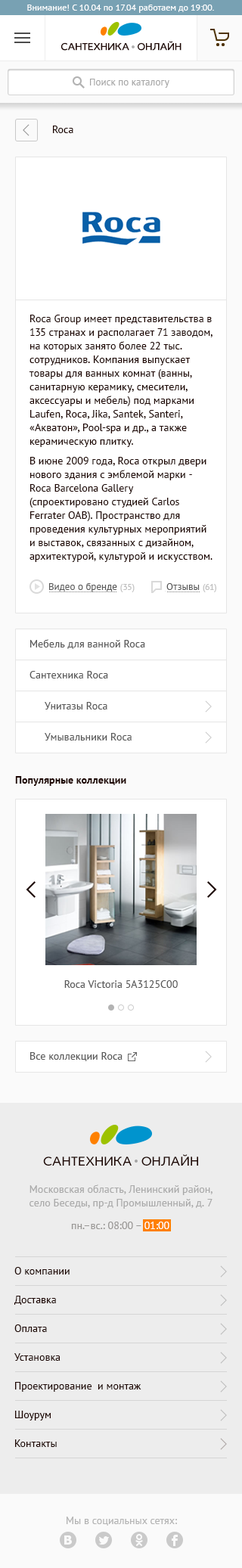
<style>
.page{position:relative;width:242px;height:1568px;background:#ffffff}
.page>*{position:absolute;margin:0}
.t1{font:9.1px "PTSans-Regular";color:#ffffff}
.t2{font:10.6px "IdealistSans";color:#1e0602;text-transform:uppercase}
.t3{font:9.8px "PTSans-Regular";color:#a6a6a6}
.t4{font:10.6px "PTSans-Regular";color:#1e0602}
.t5{font:10.6px/13.6px "PTSans-Regular";color:#1e0602}
.t6{font:9.8px "PTSans-Regular";color:#585858}
.t7{font:9.1px "PTSans-Regular";color:#bfbfbf}
.t8{font:10.6px/13.6px "PTSans-Regular";color:#585858}
.t9{font:10.6px "PTSans-Bold";color:#1e0602}
.t10{font:10.6px "PTSans-Regular";color:#585858}
.t11{font:13.6px "IdealistSans";color:#1e0602;text-transform:uppercase}
.t12{font:10.6px/13.6px "PTSans-Regular";color:#aaaaaa}
.t13{font:10.6px "PTSans-Regular";color:#999795}
.t14{font:10.6px "PTSans-Regular";color:#ffffff}
.t15{font:10.6px "PTSans-Regular";color:#b4b4b4}
</style>
<div class="page">
<p class="t1" style="left:27px;top:5px;width:187px;height:8px">Внимание! С 10.04 по 17.04 работаем до 19:00.</p>
<p class="t2" style="left:61px;top:41px;width:121px;height:10px">сантехника  онлайн</p>
<p class="t3" style="left:90px;top:79px;width:79px;height:9px">Поиск по каталогу</p>
<p class="t4" style="left:53px;top:126px;width:20px;height:7px">Roca</p>
<p class="t5" style="left:29px;top:315px;width:184px;height:247px">Roca Group имеет представительства в 135 странах и располагает 71 заводом, на которых занято более 22 тыс. сотрудников. Компания выпускает товары для ванных комнат (ванны, санитарную керамику, смесители, аксессуары и мебель) под марками Laufen, Roca, Jika, Santek, Santeri, «Акватон», Pool-spa и др., а также керамическую плитку.<br>В июне 2009 года, Roca открыл двери нового здания c эмблемой марки - Roca Barcelona Gallery (спроектировано студией Carlos Ferrater OAB). Пространство для проведения культурных мероприятий и выставок, связанных с дизайном, архитектурой, культурой и искусством.</p>
<p class="t6" style="left:49px;top:583px;width:86px;height:9px">Видео о бренде <span class="t7">(35)</span></p>
<p class="t6" style="left:166px;top:583px;width:50px;height:9px">Отзывы <span class="t7">(61)</span></p>
<p class="t8" style="left:29px;top:639px;width:116px;height:102px">Мебель для ванной Roca<br>Сантехника Roca<br>Унитазы Roca<br>Умывальники Roca</p>
<p class="t9" style="left:15px;top:776px;width:111px;height:10px">Популярные коллекции</p>
<p class="t10" style="left:64px;top:980px;width:114px;height:8px">Roca Victoria 5A3125C00</p>
<p class="t10" style="left:30px;top:1052px;width:93px;height:9px">Все коллекции Roca</p>
<p class="t11" style="left:43px;top:1154px;width:155px;height:12px">сантехника  онлайн</p>
<p class="t12" style="left:29px;top:1185px;width:184px;height:24px;text-align:center">Московская область, Ленинский район,<br>село Беседы, пр-д Промышленный, д. 7</p>
<p class="t13" style="left:71px;top:1222px;width:98px;height:7px">пн.–вc.: 08:00 – <span class="t14">01:00</span></p>
<p class="t5" style="left:14px;top:1267px;width:127px;height:180px">О компании<br>Доставка<br>Оплата<br>Установка<br>Проектирование  и монтаж<br>Шоурум<br>Контакты</p>
<p class="t15" style="left:67px;top:1517px;width:110px;height:9px">Мы в социальных сетях:</p>
</div>
